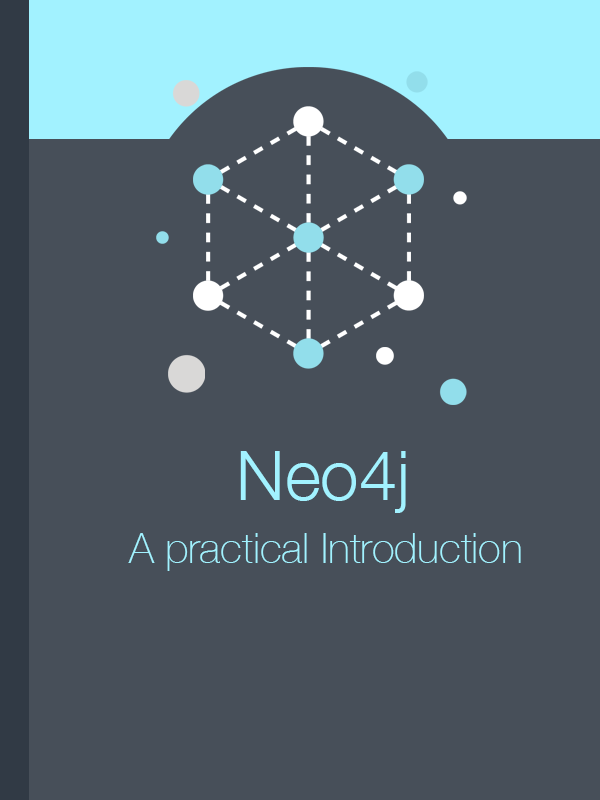
<style>
.page{position:relative;width:600px;height:800px;background:#474f59}
.page>*{position:absolute;margin:0}
.t1{font:68.7px "HelveticaNeue-Light";color:#a2f2ff}
.t2{font:42.2px "HelveticaNeue-Thin";color:#a2f2ff}
</style>
<div class="page">
<p class="t1" style="left:240px;top:451px;width:166px;height:62px">Neo4j</p>
<p class="t2" style="left:128px;top:533px;width:393px;height:38px">A practical Introduction</p>
</div>
